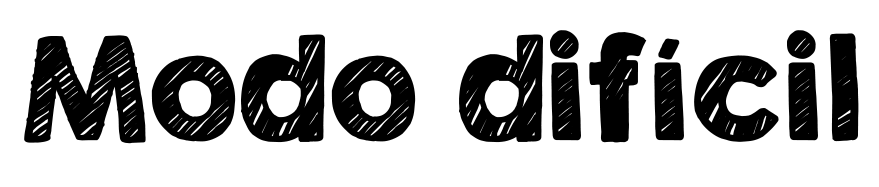
<style>
.page{position:relative;width:879px;height:187px;background:#ffffff}
.page>*{position:absolute;margin:0}
.t1{font:125px "KGSecondChancesSketch";color:#000000;font-weight:bold}
</style>
<div class="page">
<p class="t1" style="left:24px;top:30px;width:835px;height:114px">Modo difícil</p>
</div>
